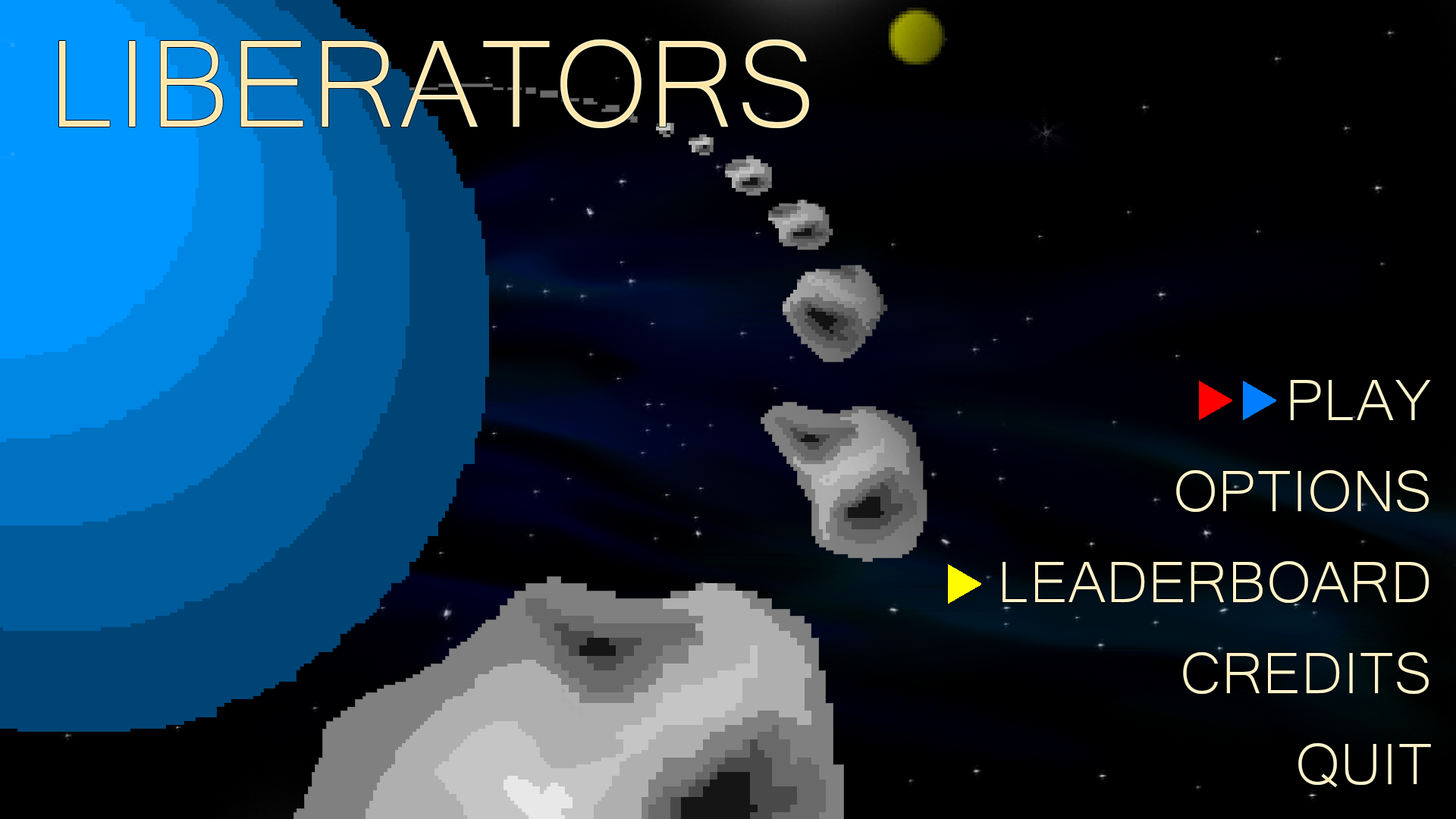
<style>
.page{position:relative;width:1456px;height:819px}
.page>*{position:absolute;margin:0}
.t1{font:159.9px "Microsoft-Yi-Baiti";color:#ffeab1}
.t2{font:75.8px "Microsoft-Yi-Baiti";color:#fff3c9}
</style>
<div class="page">
<p class="t1" style="left:59px;top:39px;width:750px;height:89px">LIBERATORS</p>
<p class="t2" style="left:1003px;top:380px;width:428px;height:407px;text-align:right">PLAY<br>OPTIONS<br>LEADERBOARD<br>CREDITS<br>QUIT</p>
</div>
